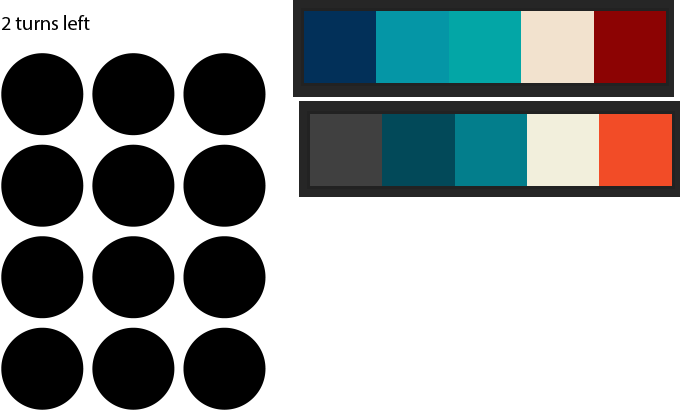
<style>
.page{position:relative;width:680px;height:410px;background:#ffffff}
.page>*{position:absolute;margin:0}
.t1{font:20px "MyriadPro-Regular";color:#000000}
</style>
<div class="page">
<p class="t1" style="left:2px;top:15px;width:88px;height:15px">2 turns left</p>
</div>
